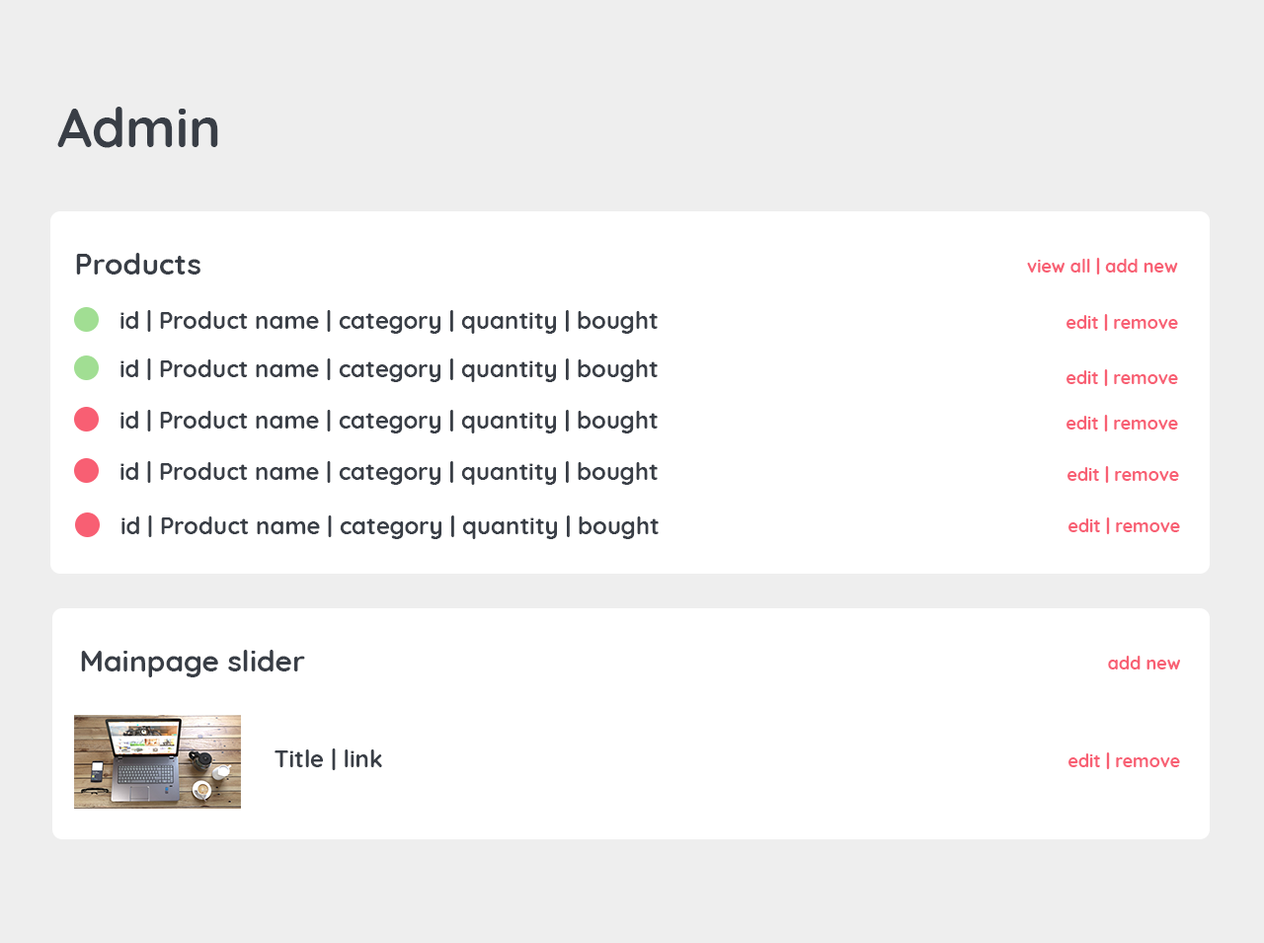
<style>
.page{position:relative;width:1264px;height:943px;background:#ffffff}
.page>*{position:absolute;margin:0}
.t1{font:54.3px "Quicksand-Bold";color:#393e46}
.t2{font:29.6px "Quicksand-Bold";color:#393e46}
.t3{font:17.8px "Quicksand-Bold";color:#f85f73}
.t4{font:23.7px "Quicksand-Bold";color:#393e46}
</style>
<div class="page">
<p class="t1" style="left:57px;top:107px;width:161px;height:41px">Admin</p>
<p class="t2" style="left:76px;top:253px;width:124px;height:22px">Products</p>
<p class="t3" style="left:1027px;top:258px;width:151px;height:17px">view all | add new</p>
<p class="t4" style="left:120px;top:310px;width:538px;height:24px">id | Product name | category | quantity | bought</p>
<p class="t3" style="left:1067px;top:314px;width:111px;height:17px">edit | remove</p>
<p class="t4" style="left:120px;top:359px;width:538px;height:23px">id | Product name | category | quantity | bought</p>
<p class="t3" style="left:1067px;top:369px;width:111px;height:17px">edit | remove</p>
<p class="t4" style="left:120px;top:410px;width:538px;height:24px">id | Product name | category | quantity | bought</p>
<p class="t3" style="left:1067px;top:415px;width:111px;height:17px">edit | remove</p>
<p class="t4" style="left:120px;top:461px;width:538px;height:24px">id | Product name | category | quantity | bought</p>
<p class="t3" style="left:1068px;top:466px;width:111px;height:17px">edit | remove</p>
<p class="t4" style="left:121px;top:516px;width:538px;height:23px">id | Product name | category | quantity | bought</p>
<p class="t3" style="left:1069px;top:518px;width:111px;height:16px">edit | remove</p>
<p class="t2" style="left:81px;top:650px;width:224px;height:28px">Mainpage slider</p>
<p class="t3" style="left:1108px;top:656px;width:72px;height:14px">add new</p>
<p class="t4" style="left:275px;top:749px;width:107px;height:21px">Title | link</p>
<p class="t3" style="left:1069px;top:753px;width:111px;height:16px">edit | remove</p>
</div>
